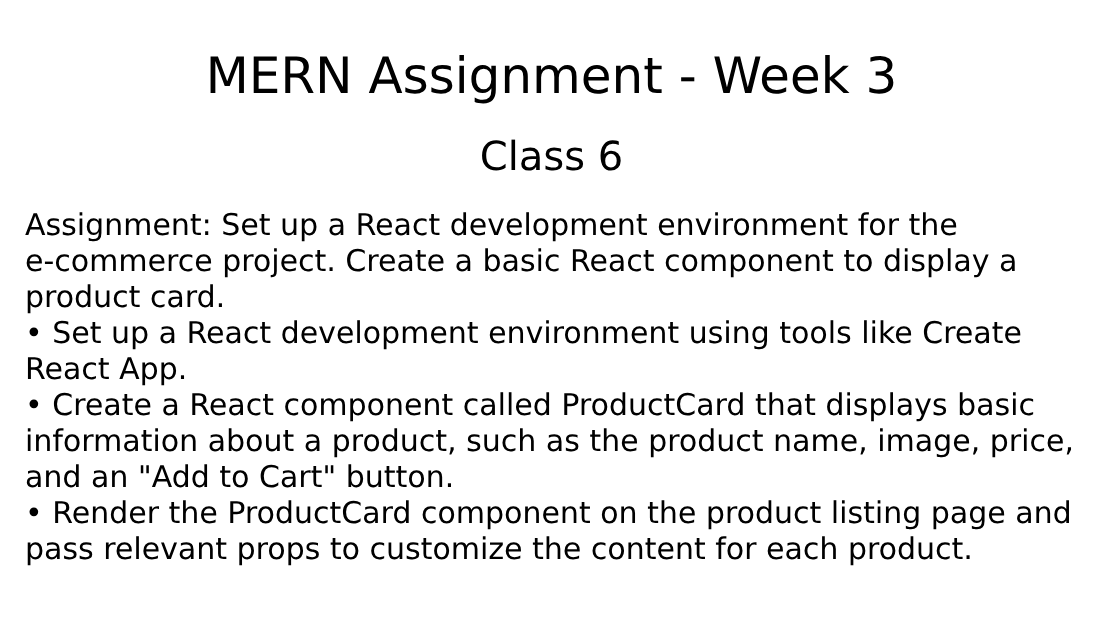
<style>
.page{position:relative;width:1100px;height:630px;background:#ffffff}
.page>*{position:absolute;margin:0}
.t1{font:30px "DejaVuSans";color:#000000}
.t2{font:24px "DejaVuSans";color:#000000}
.t3{font:50px "DejaVuSans";color:#000000}
.t4{font:40px "DejaVuSans";color:#000000}
</style>
<div class="page">
<p class="t1" style="left:25px;top:55px;width:1047px;height:511px;text-align:center"><span class="t2"><br></span><span class="t3">MERN Assignment - Week 3<br><br></span><span class="t4">Class 6<br><br></span>Assignment: Set up a React development environment for the e-commerce project. Create a basic React component to display a product card.<br>• Set up a React development environment using tools like Create React App.<br>• Create a React component called ProductCard that displays basic information about a product, such as the product name, image, price, and an "Add to Cart" button.<br>• Render the ProductCard component on the product listing page and pass relevant props to customize the content for each product.</p>
</div>
